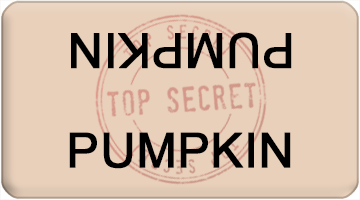
<style>
.page{position:relative;width:360px;height:200px;background:#e8d0bb}
.page>*{position:absolute;margin:0}
.t1{font:48px "ArialMT";color:#000000;font-weight:bold}
</style>
<div class="page">
<p class="t1" style="left:71px;top:32px;width:221px;height:37px;rotate:180deg">PUMPKIN</p>
<p class="t1" style="left:69px;top:132px;width:222px;height:37px">PUMPKIN</p>
</div>
